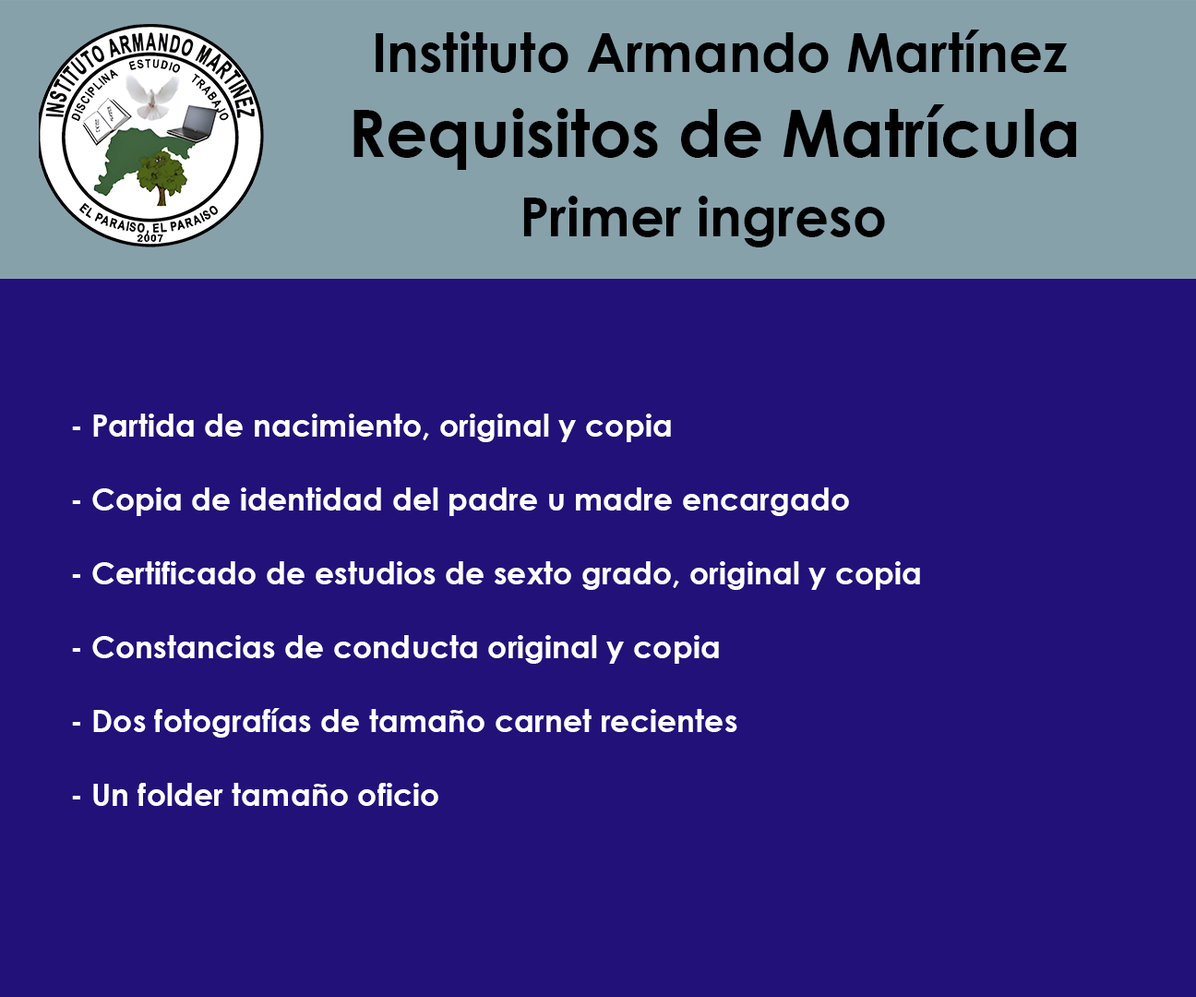
<style>
.page{position:relative;width:1196px;height:997px;background:#221179}
.page>*{position:absolute;margin:0}
.t1{font:53.8px "CenturyGothic-Bold";color:#000000}
.t2{font:65.4px "CenturyGothic-Bold";color:#000000}
.t3{font:30.8px "CenturyGothic-Bold";color:#ffffff}
</style>
<div class="page">
<p class="t1" style="left:376px;top:30px;width:692px;height:43px">Instituto Armando Martínez</p>
<p class="t2" style="left:354px;top:104px;width:723px;height:66px">Requisitos de Matrícula</p>
<p class="t1" style="left:523px;top:196px;width:362px;height:51px">Primer ingreso</p>
<p class="t3" style="left:72px;top:414px;width:848px;height:392px">- Partida de nacimiento, original y copia<br><br>- Copia de identidad del padre u madre encargado<br><br>- Certificado de estudios de sexto grado, original y copia<br><br>- Constancias de conducta original y copia<br><br>- Dos fotografías de tamaño carnet recientes<br><br>- Un folder tamaño oficio</p>
</div>
